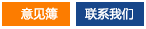
<style>
.page{position:relative;width:146px;height:29px;background:#fc7c00}
.page>*{position:absolute;margin:0}
.t1{font:12px "MicrosoftYaHei";letter-spacing:-0.005em;color:#ffffff;font-weight:bold}
</style>
<div class="page">
<p class="t1" style="left:21px;top:7px;width:37px;height:13px">意见簿</p>
<p class="t1" style="left:85px;top:8px;width:48px;height:12px">联系我们</p>
</div>
